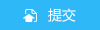
<style>
.page{position:relative;width:100px;height:30px;background:#2fb8f7}
.page>*{position:absolute;margin:0}
.t1{font:14px "MicrosoftYaHei";color:#ffffff}
</style>
<div class="page">
<p class="t1" style="left:48px;top:8px;width:28px;height:14px">提交</p>
</div>
